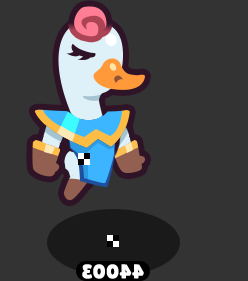
<style>
.page{position:relative;width:248px;height:281px;background:#333333}
.page>*{position:absolute;margin:0}
.t1{font:19.9px "LilitaOne";color:#ffffff;font-weight:bold}
</style>
<div class="page">
<p class="t1" style="left:82px;top:264px;width:62px;height:15px;rotate:180deg">44003</p>
</div>
